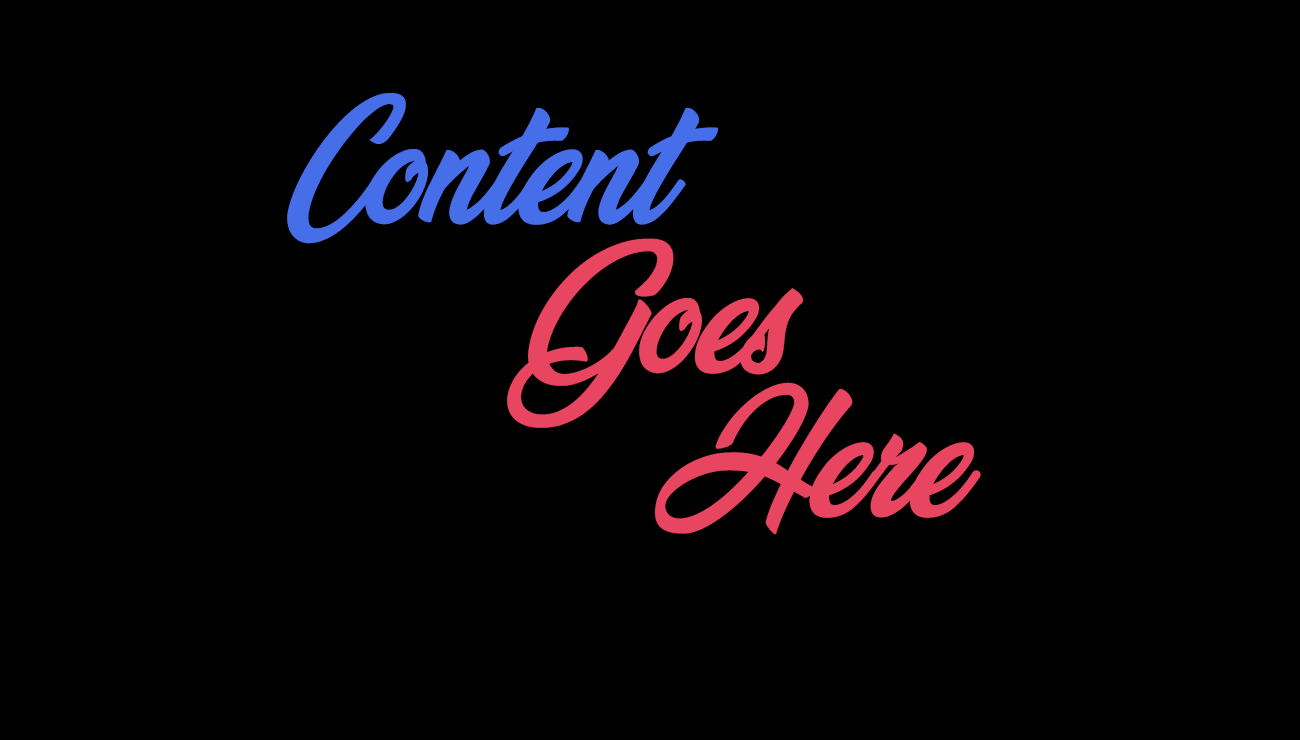
<style>
.page{position:relative;width:1300px;height:740px;background:#000000}
.page>*{position:absolute;margin:0}
.t1{font:125px "VeganStylePersonalUse";color:#466ee8}
.t2{font:125px "VeganStylePersonalUse";color:#e84560}
</style>
<div class="page">
<p class="t1" style="left:287px;top:93px;width:431px;height:151px">Content</p>
<p class="t2" style="left:507px;top:238px;width:296px;height:190px">Goes</p>
<p class="t2" style="left:655px;top:382px;width:326px;height:153px">Here</p>
</div>
